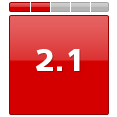
<style>
.page{position:relative;width:117px;height:117px;background:#d40000}
.page>*{position:absolute;margin:0}
.t1{font:36px "Colaborate-Bold";color:#ffffff;text-transform:uppercase}
</style>
<div class="page">
<p class="t1" style="left:35px;top:49px;width:45px;height:22px">2.1</p>
</div>
